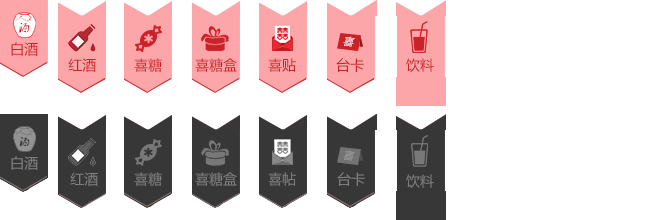
<style>
.page{position:relative;width:650px;height:220px;background:#ffffff}
.page>*{position:absolute;margin:0}
.t1{font:10.5px "MicrosoftYaHei";letter-spacing:0.42em;color:#a0a0a0}
.t2{font:14px "MicrosoftYaHei";color:#7e7e7e}
</style>
<div class="page">
<p class="t1" style="left:343px;top:150px;width:12px;height:11px;rotate:6deg">喜</p>
<p class="t2" style="left:11px;top:156px;width:27px;height:14px">白酒</p>
<p class="t2" style="left:70px;top:172px;width:28px;height:14px">红酒</p>
<p class="t2" style="left:134px;top:172px;width:28px;height:14px">喜糖</p>
<p class="t2" style="left:195px;top:172px;width:42px;height:14px">喜糖盒</p>
<p class="t2" style="left:268px;top:172px;width:28px;height:14px">喜帖</p>
<p class="t2" style="left:337px;top:172px;width:28px;height:14px">台卡</p>
<p class="t2" style="left:406px;top:174px;width:28px;height:14px">饮料</p>
</div>
